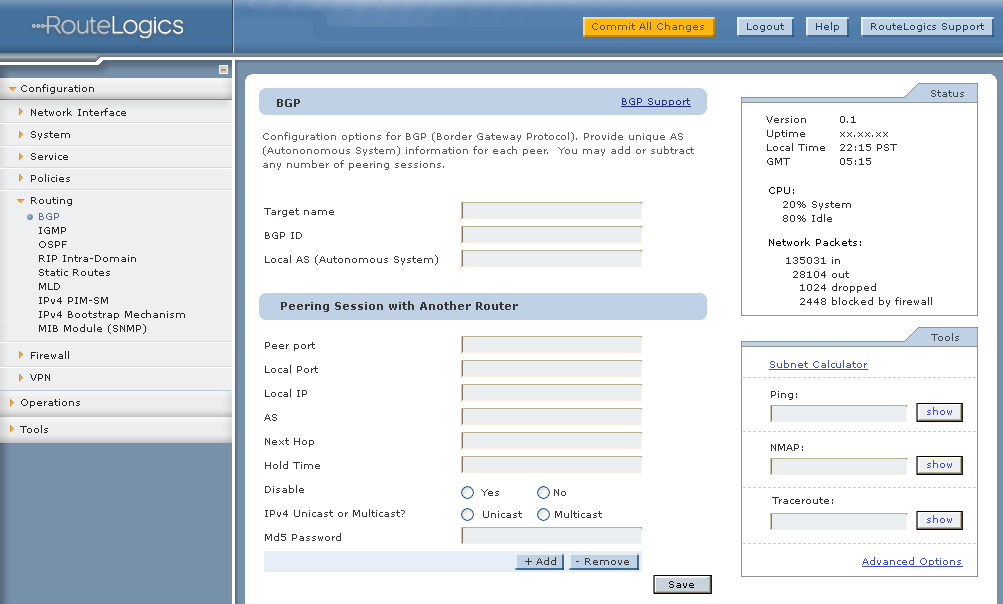
<style>
.page{position:relative;width:1003px;height:604px;background:#ffffff}
.page>*{position:absolute;margin:0}
.t1{font:10px "Verdana";color:#515151}
.t2{font:10px "Verdana";color:#1f435f}
.t3{font:10px "Verdana";color:#252525}
.t4{font:11px "Verdana-Bold";color:#383636}
.t5{font:10px "Verdana";color:#212e82;text-decoration:underline}
.t6{font:10px "Verdana";color:#3e484e}
.t7{font:10px/22px "Verdana";color:#252525}
.t8{font:10px/14px "Verdana";color:#2e2e2e}
.t9{font:10px/14px "Verdana";color:#5b5858}
.t10{font:10px "Verdana";color:#000000}
.t11{font:10px/24px "Verdana";color:#383636}
.t12{font:10px/14px "Verdana";color:#252525}
.t13{font:10px/14px "Verdana";color:#5c6b93}
.t14{font:10px "Verdana";color:#3e50bd;text-decoration:underline}
.t15{font:10px "Verdana";color:#2e2e2e}
.t16{font:10px "Verdana";color:#383636}
</style>
<div class="page">
<p class="t1" style="left:592px;top:22px;width:112px;height:10px">Commit All Changes</p>
<p class="t2" style="left:747px;top:23px;width:37px;height:9px">Logout</p>
<p class="t2" style="left:816px;top:22px;width:23px;height:10px">Help</p>
<p class="t2" style="left:871px;top:23px;width:113px;height:9px">RouteLogics Support</p>
<p class="t3" style="left:21px;top:84px;width:73px;height:10px">Configuration</p>
<p class="t4" style="left:277px;top:99px;width:23px;height:8px">BGP</p>
<p class="t5" style="left:621px;top:98px;width:70px;height:9px">BGP Support</p>
<p class="t6" style="left:931px;top:90px;width:33px;height:7px">Status</p>
<p class="t7" style="left:31px;top:108px;width:95px;height:98px">Network Interface<br>System<br>Service<br>Policies<br>Routing</p>
<p class="t8" style="left:766px;top:116px;width:59px;height:49px">Version<br>Uptime<br>Local Time<br>GMT</p>
<p class="t8" style="left:840px;top:116px;width:57px;height:49px">0.1<br>xx.xx.xx<br>22:15 PST<br>05:15</p>
<p class="t9" style="left:263px;top:132px;width:431px;height:38px">Configuration options for BGP (Border Gateway Protocol). Provide unique AS <br>(Autononomous System) information for each peer.  You may add or subtract<br>any number of peering sessions.</p>
<p class="t10" style="left:769px;top:187px;width:25px;height:7px">CPU:</p>
<p class="t11" style="left:264px;top:208px;width:174px;height:57px">Target name<br>BGP ID<br>Local AS (Autonomous System)</p>
<p class="t8" style="left:783px;top:201px;width:68px;height:21px">20% System<br>80% Idle</p>
<p class="t12" style="left:39px;top:213px;width:146px;height:121px"><span class="t13">BGP<br></span>IGMP<br>OSPF<br>RIP Intra-Domain<br>Static Routes<br>MLD<br>IPv4 PIM-SM<br>IPv4 Bootstrap Mechanism<br>MIB Module (SNMP)</p>
<p class="t10" style="left:769px;top:238px;width:92px;height:8px">Network Packets:</p>
<p class="t4" style="left:281px;top:301px;width:237px;height:11px">Peering Session with Another Router</p>
<p class="t11" style="left:264px;top:342px;width:141px;height:199px">Peer port<br>Local Port<br>Local IP<br>AS<br>Next Hop<br>Hold Time<br>Disable<br>IPv4 Unicast or Multicast?<br>Md5 Password</p>
<p class="t6" style="left:931px;top:333px;width:28px;height:8px">Tools</p>
<p class="t7" style="left:30px;top:351px;width:39px;height:30px">Firewall<br>VPN</p>
<p class="t14" style="left:769px;top:360px;width:99px;height:10px">Subnet Calculator</p>
<p class="t3" style="left:21px;top:399px;width:59px;height:9px">Operations</p>
<p class="t15" style="left:771px;top:391px;width:26px;height:9px">Ping:</p>
<p class="t3" style="left:20px;top:425px;width:28px;height:8px">Tools</p>
<p class="t15" style="left:771px;top:444px;width:32px;height:7px">NMAP:</p>
<p class="t16" style="left:481px;top:489px;width:85px;height:7px">Yes  No</p>
<p class="t15" style="left:772px;top:497px;width:61px;height:7px">Traceroute:</p>
<p class="t16" style="left:483px;top:510px;width:119px;height:8px">Unicast Multicast</p>
<p class="t14" style="left:862px;top:557px;width:101px;height:10px">Advanced Options</p>
</div>
